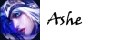
<style>
.page{position:relative;width:140px;height:40px;background:#ffffff}
.page>*{position:absolute;margin:0}
.t1{font:12px "VinerHandITC";color:#000000}
</style>
<div class="page">
<p class="t1" style="left:47px;top:11px;width:36px;height:15px">Ashe</p>
</div>
